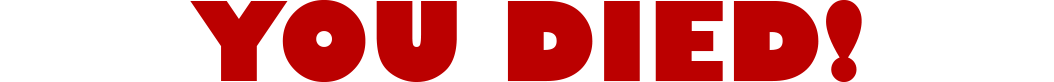
<style>
.page{position:relative;width:1054px;height:82px;background:#ffffff}
.page>*{position:absolute;margin:0}
.t1{font:108.3px "GillSans-UltraBold";color:#bb0000}
</style>
<div class="page">
<p class="t1" style="left:190px;top:0px;width:672px;height:82px">YOU DIED!</p>
</div>
